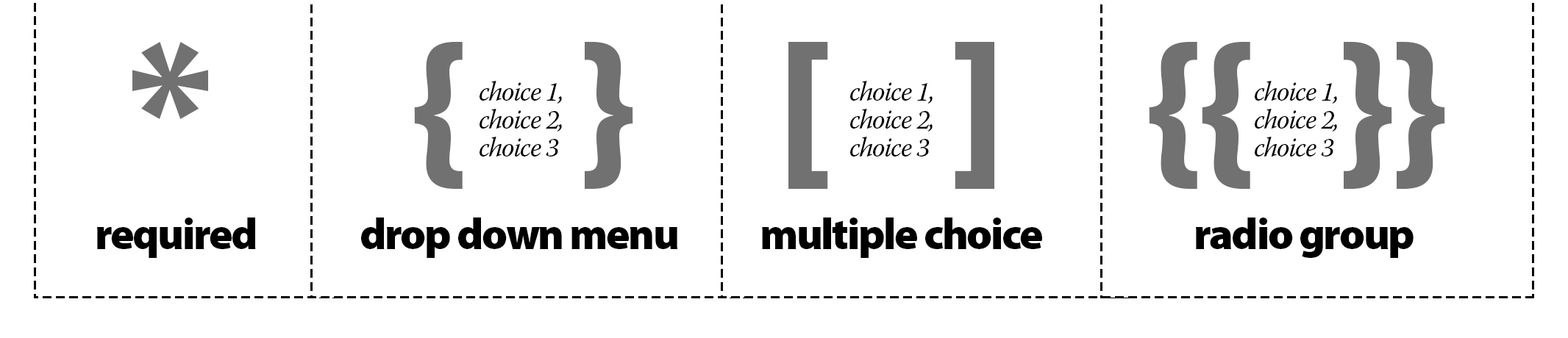
<style>
.page{position:relative;width:1568px;height:338px;background:#ffffff}
.page>*{position:absolute;margin:0}
.t1{font:183.9px "MyriadPro-Black";letter-spacing:-0.04em;color:#717171}
.t2{font:26.9px/27.8px "WarnockPro-It";letter-spacing:-0.04em;color:#000000}
.t3{font:44.1px "MyriadPro-Black";letter-spacing:-0.04em;color:#000000}
</style>
<div class="page">
<p class="t1" style="left:132px;top:42px;width:1313px;height:147px">*       {    }     [    ]     {{   }}</p>
<p class="t2" style="left:480px;top:81px;width:82px;height:76px">choice 1,<br>choice 2,<br>choice 3</p>
<p class="t2" style="left:850px;top:81px;width:83px;height:76px">choice 1,<br>choice 2,<br>choice 3</p>
<p class="t2" style="left:1255px;top:81px;width:82px;height:76px">choice 1,<br>choice 2,<br>choice 3</p>
<p class="t3" style="left:97px;top:218px;width:159px;height:40px">required</p>
<p class="t3" style="left:361px;top:218px;width:316px;height:40px">drop down menu</p>
<p class="t3" style="left:762px;top:218px;width:280px;height:40px">multiple choice</p>
<p class="t3" style="left:1196px;top:218px;width:218px;height:40px">radio group</p>
</div>
